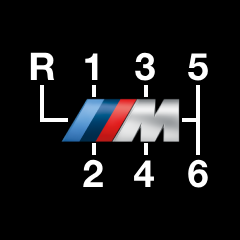
<style>
.page{position:relative;width:240px;height:240px;background:#000000}
.page>*{position:absolute;margin:0}
.t1{font:36px "BMWHelveticaBold";color:#ffffff}
</style>
<div class="page">
<p class="t1" style="left:30px;top:52px;width:25px;height:28px">R</p>
<p class="t1" style="left:85px;top:53px;width:13px;height:27px">1</p>
<p class="t1" style="left:135px;top:52px;width:20px;height:29px">3</p>
<p class="t1" style="left:188px;top:53px;width:20px;height:28px">5</p>
<p class="t1" style="left:83px;top:159px;width:20px;height:28px">2</p>
<p class="t1" style="left:134px;top:160px;width:20px;height:27px">4</p>
<p class="t1" style="left:188px;top:159px;width:20px;height:29px">6</p>
</div>
